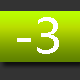
<style>
.page{position:relative;width:80px;height:80px;background:#333333}
.page>*{position:absolute;margin:0}
.t1{font:48px "MicrosoftYaHei";color:#ffffff}
</style>
<div class="page">
<p class="t1" style="left:17px;top:17px;width:42px;height:37px">-3</p>
</div>
